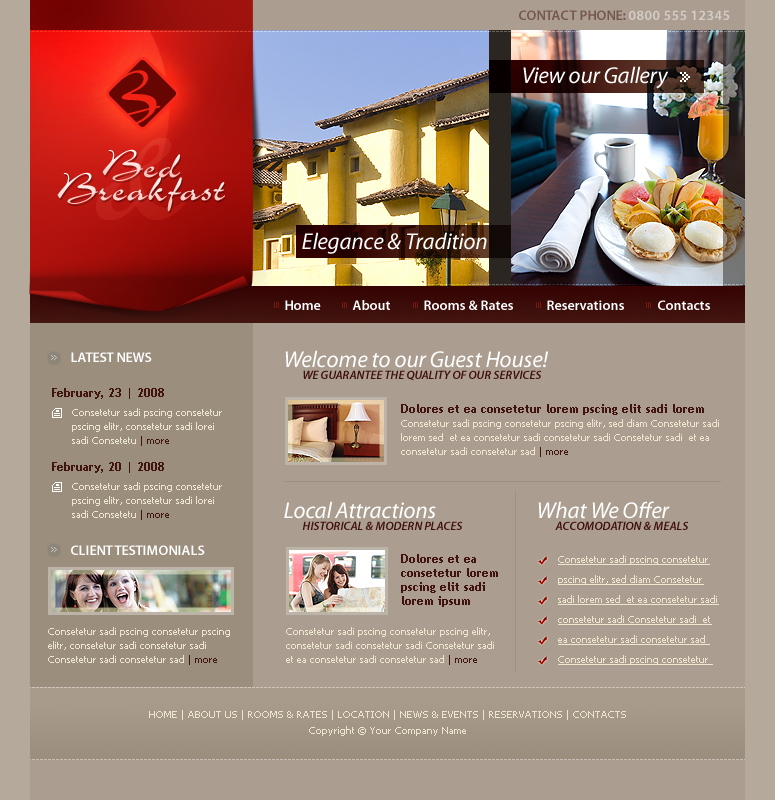
<style>
.page{position:relative;width:775px;height:800px;background:#ab9d90}
.page>*{position:absolute;margin:0}
.t1{font:23px "MyriadPro-It";color:#ffffff}
.t2{font:45px "CharmeStd"}
.t3{font:45px "CharmeStd";color:#ffdbd7}
.t4{font:14px "MyriadPro-Semibold";color:#ffffff}
.t5{font:12px "MyriadPro-SemiboldIt";color:#3f100c;text-transform:uppercase}
.t6{font:12px "TrebuchetMS-Bold";color:#42140f}
.t7{font:10px/14px "Tahoma";color:#ece6ce}
.t8{font:10px/14px "Tahoma";color:#42140f}
.t9{font:12px/14px "TrebuchetMS-Bold";color:#42140f}
.t10{font:10px/20px "Tahoma";color:#ece6ce;text-decoration:underline}
.t11{font:10px "Tahoma";color:#cfc7bc;text-transform:uppercase}
.t12{font:10px/16px "Tahoma";color:#ece6ce}
.t13{font:10px "Tahoma";color:#c7beb3;text-transform:uppercase}
</style>
<div class="page">
<p class="t1" style="left:523px;top:66px;width:146px;height:23px">View our Gallery</p>
<p class="t2" style="left:102px;top:149px;width:79px;height:32px">Bed</p>
<p class="t3" style="left:57px;top:172px;width:168px;height:40px">Breakfast</p>
<p class="t1" style="left:302px;top:232px;width:185px;height:22px">Elegance &amp; Tradition</p>
<p class="t4" style="left:285px;top:300px;width:36px;height:10px">Home</p>
<p class="t4" style="left:352px;top:300px;width:38px;height:10px">About</p>
<p class="t4" style="left:424px;top:300px;width:89px;height:10px">Rooms &amp; Rates</p>
<p class="t4" style="left:547px;top:300px;width:77px;height:10px">Reservations</p>
<p class="t4" style="left:658px;top:300px;width:52px;height:10px">Contacts</p>
<p class="t4" style="left:71px;top:352px;width:81px;height:10px">LATEST NEWS</p>
<p class="t1" style="left:285px;top:350px;width:264px;height:18px">Welcome to our Guest House!</p>
<p class="t5" style="left:303px;top:370px;width:239px;height:11px">we guarantee the quality of our services</p>
<p class="t6" style="left:52px;top:388px;width:112px;height:11px">February, 23 | 2008</p>
<p class="t7" style="left:72px;top:408px;width:150px;height:38px">Consetetur sadi pscing consetetur pscing elitr, consetetur sadi lorei sadi Consetetu <span class="t8">| more</span></p>
<p class="t6" style="left:52px;top:462px;width:112px;height:11px">February, 20 | 2008</p>
<p class="t7" style="left:72px;top:482px;width:150px;height:38px">Consetetur sadi pscing consetetur pscing elitr, consetetur sadi lorei sadi Consetetu <span class="t8">| more</span></p>
<p class="t1" style="left:284px;top:501px;width:152px;height:18px">Local Attractions</p>
<p class="t1" style="left:538px;top:501px;width:132px;height:18px">What We Offer</p>
<p class="t5" style="left:302px;top:521px;width:161px;height:9px">HISTORICAL &amp; MODERN PLACES</p>
<p class="t5" style="left:555px;top:521px;width:134px;height:9px">ACCOMODATION &amp; MEALS</p>
<p class="t4" style="left:71px;top:545px;width:134px;height:10px">CLIENT TESTIMONIALS</p>
<p class="t9" style="left:401px;top:554px;width:97px;height:53px">Dolores et ea consetetur lorem pscing elit sadi lorem ipsum</p>
<p class="t10" style="left:558px;top:555px;width:161px;height:110px">Consetetur sadi pscing consetetur pscing elitr, sed diam Consetetur sadi lorem sed  et ea consetetur sadi consetetur sadi Consetetur sadi  et ea consetetur sadi consetetur sad <br>Consetetur sadi pscing consetetur</p>
<p class="t7" style="left:48px;top:627px;width:182px;height:38px">Consetetur sadi pscing consetetur pscing elitr, consetetur sadi consetetur sadi Consetetur sadi consetetur sad <span class="t8">| more</span></p>
<p class="t7" style="left:286px;top:627px;width:208px;height:38px">Consetetur sadi pscing consetetur pscing elitr, consetetur sadi consetetur sadi Consetetur sadi  et ea consetetur sadi consetetur sad <span class="t8">| more</span></p>
<p class="t11" style="left:12px;top:687px;width:739px;height:1px">-----------------------------------------------------------------------------------------------------------------------------------------------------------------------------------------</p>
<p class="t12" style="left:149px;top:710px;width:477px;height:26px;text-align:center">HOME | ABOUT US | ROOMS &amp; RATES | LOCATION | NEWS &amp; EVENTS | RESERVATIONS | CONTACTS<br>Copyright © Your Company Name</p>
<p class="t13" style="left:12px;top:759px;width:739px;height:1px">-----------------------------------------------------------------------------------------------------------------------------------------------------------------------------------------</p>
</div>
